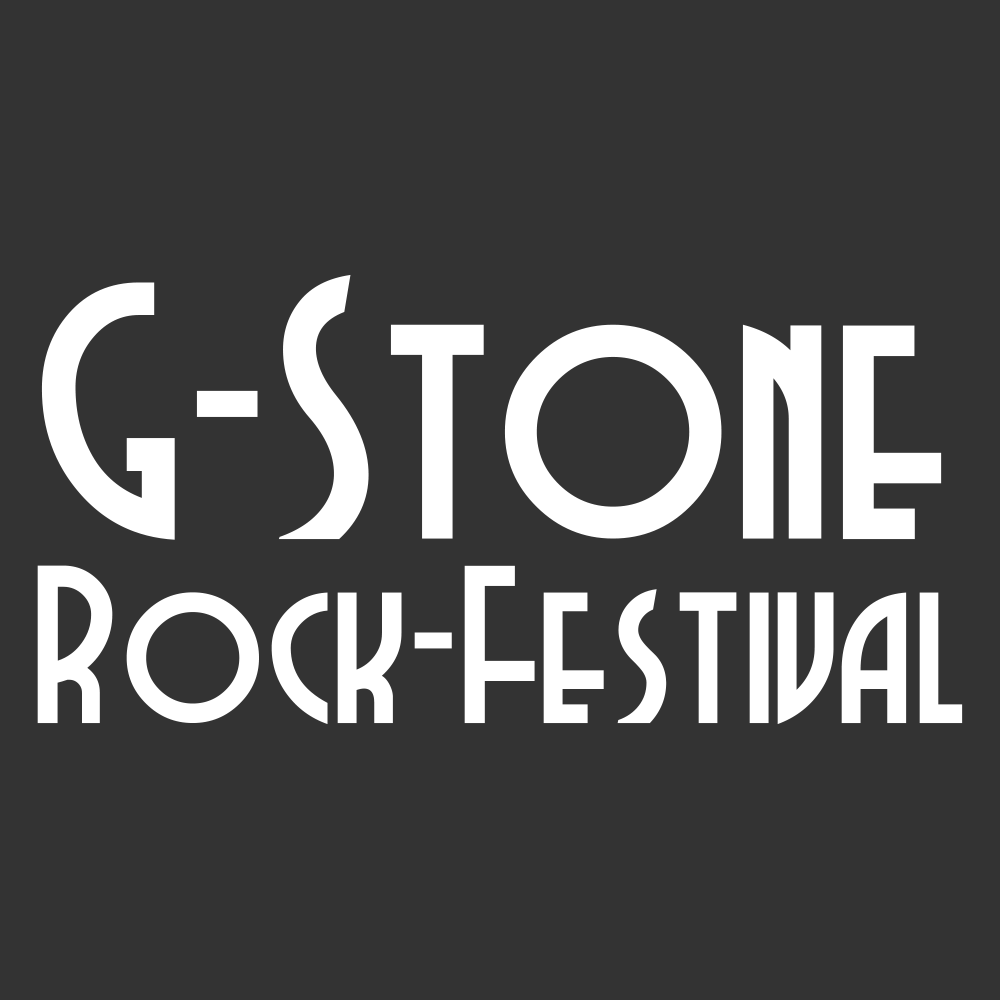
<style>
.page{position:relative;width:1000px;height:1000px;background:#333333}
.page>*{position:absolute;margin:0}
.t1{font:341.7px "DubbaDubbaNF";color:#ffffff}
.t2{font:209.3px "DubbaDubbaNF";color:#ffffff}
</style>
<div class="page">
<p class="t1" style="left:41px;top:274px;width:901px;height:266px">G-Stone</p>
<p class="t2" style="left:37px;top:565px;width:926px;height:160px">Rock-Festival</p>
</div>
